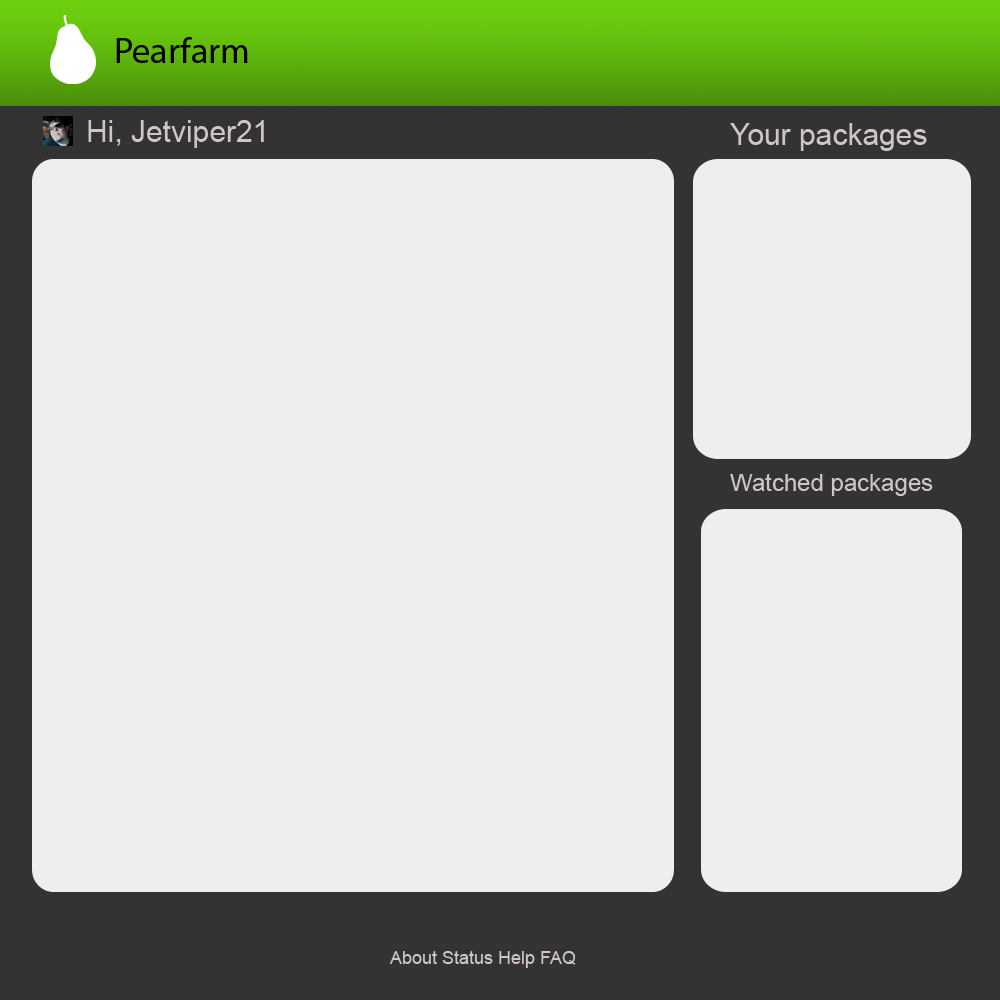
<style>
.page{position:relative;width:1000px;height:1000px;background:#eeeeee}
.page>*{position:absolute;margin:0}
.t1{font:36px "MyriadPro-Regular";color:#000000}
.t2{font:30px "ArialMT";color:#d0c5c5}
.t3{font:24px "ArialMT";color:#d0c5c5}
.t4{font:18px "ArialMT";color:#d0c5c5}
</style>
<div class="page">
<p class="t1" style="left:116px;top:37px;width:132px;height:26px">Pearfarm</p>
<p class="t2" style="left:88px;top:120px;width:176px;height:28px">Hi, Jetviper21</p>
<p class="t2" style="left:730px;top:123px;width:197px;height:28px">Your packages</p>
<p class="t3" style="left:730px;top:473px;width:203px;height:23px">Watched packages</p>
<p class="t4" style="left:389px;top:951px;width:187px;height:17px">About Status Help FAQ</p>
</div>
